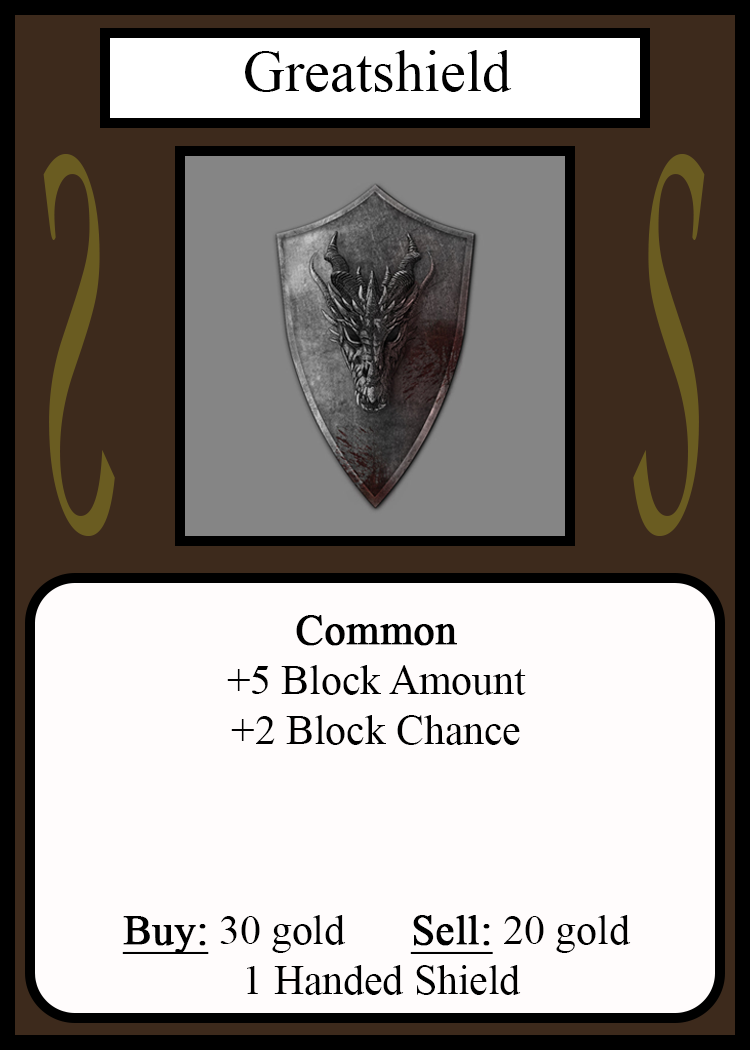
<style>
.page{position:relative;width:750px;height:1050px;background:#fffcfc}
.page>*{position:absolute;margin:0}
.t1{font:58.3px "TimesNewRomanPSMT";color:#010101}
.t2{font:548.5px "Apple-Chancery";color:#6a5c21;scale:0.27 1}
.t3{font:548.2px "Apple-Chancery";color:#6a5c21;scale:0.27 1}
.t4{font:41.7px "TimesNewRomanPSMT";color:#000000}
.t5{font:41.7px "TimesNewRomanPSMT";color:#000000;font-weight:bold}
.t6{font:41.7px "TimesNewRomanPSMT";color:#000000;font-weight:bold;text-decoration:underline}
</style>
<div class="page">
<p class="t1" style="left:245px;top:50px;width:267px;height:42px">Greatshield</p>
<p class="t2" style="left:43px;top:154px;width:72px;height:382px;rotate:180deg">S</p>
<p class="t3" style="left:633px;top:154px;width:72px;height:382px">S</p>
<p class="t4" style="left:122px;top:615px;width:509px;height:380px;text-align:center"><span class="t5">Common<br></span>+5 Block Amount<br>+2 Block Chance<br><br><br><br><span class="t6">Buy:</span> 30 gold   <span class="t6">Sell:</span> 20 gold<br> 1 Handed Shield</p>
</div>
